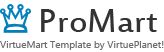
<style>
.page{position:relative;width:164px;height:52px;background:#ffffff}
.page>*{position:absolute;margin:0}
.t1{font:36px "EstrangeloEdessa";color:#333333}
.t2{font:10px "KhmerUI";color:#6d6d6d}
</style>
<div class="page">
<p class="t1" style="left:41px;top:9px;width:116px;height:23px">ProMart</p>
<p class="t2" style="left:0px;top:41px;width:164px;height:9px">VirtueMart Template by VirtuePlanet!</p>
</div>
